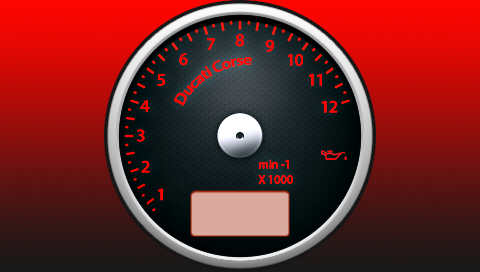
<style>
.page{position:relative;width:480px;height:272px}
.page>*{position:absolute;margin:0}
.t1{font:17.5px "MyriadPro-Semibold";letter-spacing:-0.04em;color:#ff0600}
.t2{font:17.5px "MyriadPro-Semibold";letter-spacing:-0.04em;color:#ff0700}
.t3{font:15.3px "MyriadPro-Semibold";letter-spacing:-0.04em;color:#ff0600}
.t4{font:17.5px "MyriadPro-Semibold";letter-spacing:-0.04em;color:#ff0700;scale:1.04 1}
.t5{font:17.5px "MyriadPro-Semibold";letter-spacing:-0.04em;color:#ff0600;scale:1.06 1}
.t6{font:17.5px "MyriadPro-Semibold";letter-spacing:-0.04em;color:#ff0600;scale:1.04 1}
.t7{font:12.8px "MyriadPro-Semibold";letter-spacing:-0.04em;color:#ff0600}
</style>
<div class="page">
<p class="t1" style="left:207px;top:38px;width:8px;height:12px">7</p>
<p class="t1" style="left:235px;top:34px;width:9px;height:13px">8</p>
<p class="t2" style="left:265px;top:39px;width:9px;height:13px">9</p>
<p class="t1" style="left:179px;top:53px;width:9px;height:13px">6</p>
<p class="t1" style="left:287px;top:54px;width:16px;height:12px">10</p>
<p class="t3" style="left:174px;top:57px;width:78px;height:49px;rotate:-31deg">Ducati Corse</p>
<p class="t4" style="left:157px;top:74px;width:8px;height:12px">5</p>
<p class="t1" style="left:308px;top:74px;width:14px;height:12px">11</p>
<p class="t5" style="left:140px;top:100px;width:10px;height:12px">4</p>
<p class="t1" style="left:321px;top:100px;width:17px;height:13px">12</p>
<p class="t6" style="left:136px;top:129px;width:9px;height:13px">3</p>
<p class="t6" style="left:141px;top:160px;width:9px;height:13px">2</p>
<p class="t7" style="left:258px;top:159px;width:35px;height:25px">min -1<br>X 1000</p>
<p class="t6" style="left:158px;top:188px;width:5px;height:13px">1</p>
</div>
